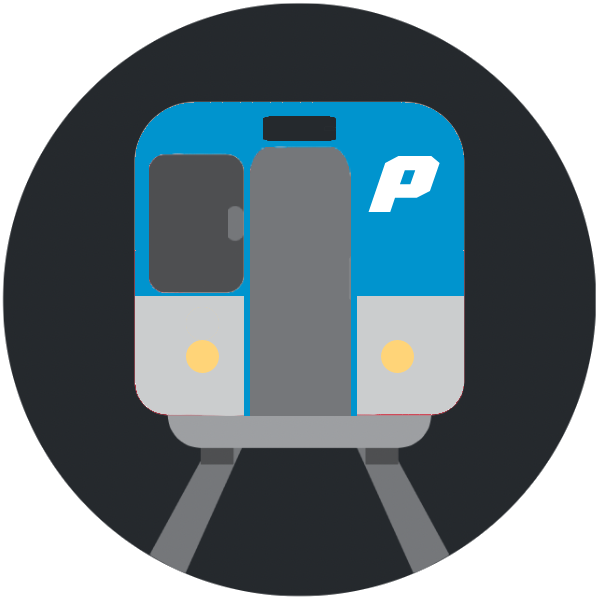
<style>
.page{position:relative;width:600px;height:600px;background:#25292d}
.page>*{position:absolute;margin:0}
.t1{font:80px "Commando";color:#ffffff;scale:1.53 1}
</style>
<div class="page">
<p class="t1" style="left:368px;top:156px;width:72px;height:56px">P</p>
</div>
